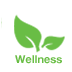
<style>
.page{position:relative;width:72px;height:72px;background:#ffffff}
.page>*{position:absolute;margin:0}
.t1{font:11px "HelveticaNeue-Bold";color:#69bd45}
</style>
<div class="page">
<p class="t1" style="left:15px;top:55px;width:47px;height:9px">Wellness</p>
</div>
